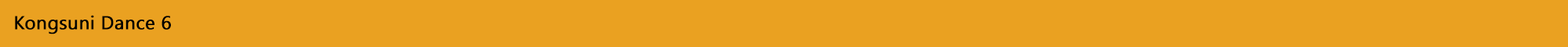
<style>
.page{position:relative;width:1568px;height:47px;background:#eaa121}
.page>*{position:absolute;margin:0}
.t1{font:18.6px "SegoeUI";color:#000000;font-weight:bold}
</style>
<div class="page">
<p class="t1" style="left:15px;top:15px;width:156px;height:19px">Kongsuni Dance 6</p>
</div>
